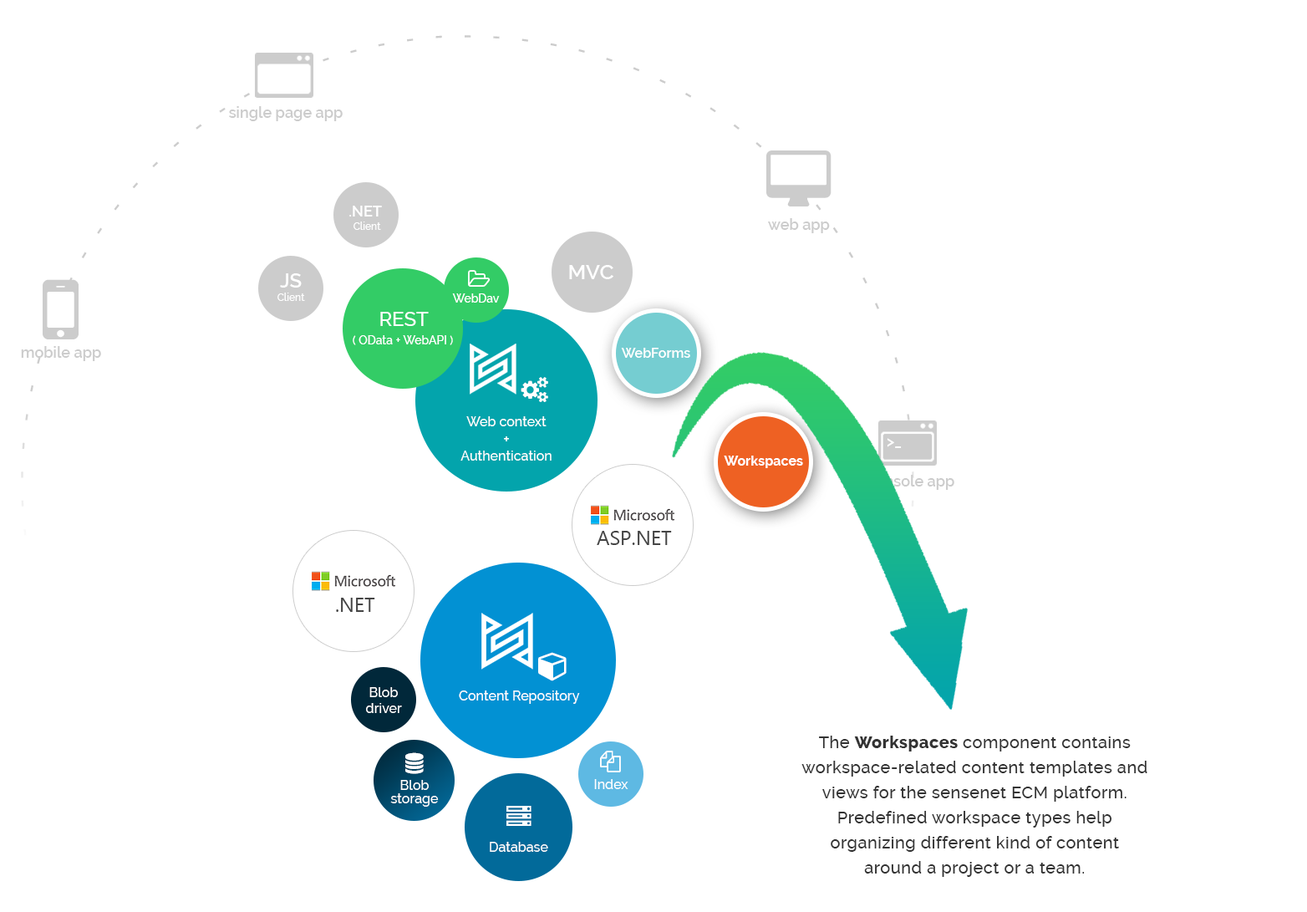
<style>
.page{position:relative;width:1307px;height:912px;background:#ffffff}
.page>*{position:absolute;margin:0}
.t1{font:15px "Raleway-SemiBold";color:#cccccc}
.t2{font:10px/13.4px "Raleway-Medium";color:#ffffff}
.t3{font:15px/13.4px "Raleway-SemiBold";color:#ffffff}
.t4{font:20.9px "Raleway-SemiBold";color:#ffffff}
.t5{font:20.1px/13.4px "Raleway-SemiBold";color:#ffffff}
.t6{font:11.7px "Raleway-Medium";color:#ffffff}
.t7{font:20.1px "Raleway-Medium";color:#ffffff}
.t8{font:13.4px "Raleway-SemiBold";color:#ffffff}
.t9{font:13.4px "Raleway-Medium";color:#ffffff}
.t10{font:15px "Raleway-Medium";color:#ffffff}
.t11{font:15px "Raleway-SemiBold";color:#ffffff}
.t12{font:13.4px "Raleway-Bold";color:#ffffff}
.t13{font:20.1px "SegoeUI";color:#444444}
.t14{font:16.7px/25.1px "Raleway-Medium";letter-spacing:0.025em;color:#333333}
.t15{font:16.7px/25.1px "Raleway-ExtraBold";letter-spacing:0.025em;color:#333333}
.t16{font:13.4px/13.4px "Raleway-Medium";color:#ffffff}
</style>
<div class="page">
<p class="t1" style="left:229px;top:106px;width:114px;height:15px">single page app</p>
<p class="t2" style="left:349px;top:206px;width:33px;height:24px;text-align:center"><span class="t3">.NET <br></span>Client</p>
<p class="t1" style="left:768px;top:218px;width:62px;height:15px">web app</p>
<p class="t4" style="left:569px;top:265px;width:45px;height:14px">MVC</p>
<p class="t2" style="left:278px;top:273px;width:27px;height:28px;text-align:center"><span class="t5">JS<br></span>Client</p>
<p class="t6" style="left:452px;top:293px;width:48px;height:10px">WebDav</p>
<p class="t7" style="left:380px;top:312px;width:49px;height:14px">REST</p>
<p class="t6" style="left:353px;top:335px;width:100px;height:10px">( OData + WebAPI )</p>
<p class="t1" style="left:21px;top:346px;width:80px;height:15px">mobile app</p>
<p class="t8" style="left:621px;top:348px;width:70px;height:10px">WebForms</p>
<p class="t9" style="left:461px;top:416px;width:91px;height:45px;text-align:center">Web context<br><span class="t10">+<br></span>Authentication</p>
<p class="t11" style="left:887px;top:438px;width:15px;height:10px">&gt;_</p>
<p class="t12" style="left:724px;top:456px;width:79px;height:12px">Workspaces</p>
<p class="t1" style="left:868px;top:475px;width:87px;height:15px">console app</p>
<p class="t13" style="left:597px;top:531px;width:75px;height:14px">ASP.NET</p>
<p class="t13" style="left:336px;top:598px;width:39px;height:14px">.NET</p>
<p class="t9" style="left:366px;top:687px;width:36px;height:26px;text-align:center">Blob<br>driver</p>
<p class="t9" style="left:459px;top:691px;width:121px;height:13px">Content Repository</p>
<p class="t14" style="left:802px;top:736px;width:346px;height:141px;text-align:center">The <span class="t15">Workspaces </span>component contains workspace-related content templates and views for the sensenet ECM platform. Predefined workspace types help organizing different kind of content around a project or a team.</p>
<p class="t16" style="left:390px;top:780px;width:49px;height:27px;text-align:center">Blob storage</p>
<p class="t9" style="left:594px;top:779px;width:35px;height:10px">Index</p>
<p class="t9" style="left:490px;top:842px;width:58px;height:10px">Database</p>
</div>
